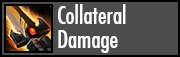
<style>
.page{position:relative;width:180px;height:57px;background:#4c4c4c}
.page>*{position:absolute;margin:0}
.t1{font:24px/24px "FuturaCondensed";color:#ffffff}
</style>
<div class="page">
<p class="t1" style="left:58px;top:4px;width:68px;height:49px;text-align:right">Collateral<br>Damage</p>
</div>
